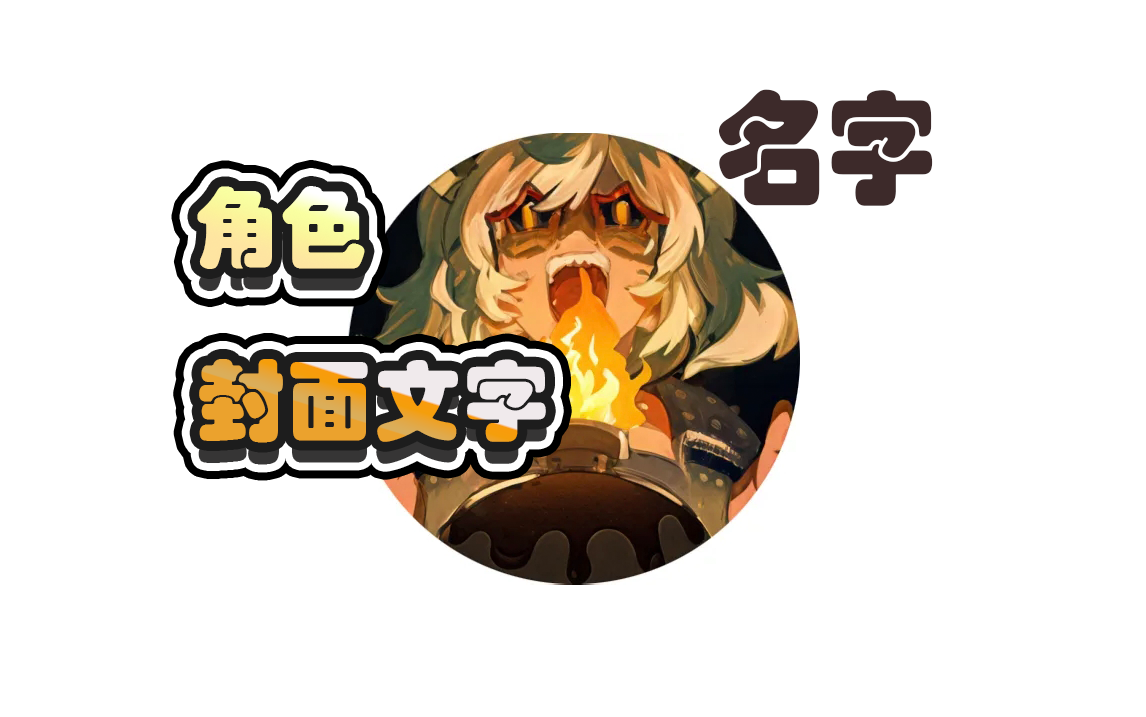
<style>
.page{position:relative;width:1146px;height:717px;background:#ffffff}
.page>*{position:absolute;margin:0}
.t1{font:124.1px "STHupo";color:#3d2a2a;scale:0.91 1}
.t2{font:88.3px "STHupo";color:#fcf49f}
.t3{font:88.3px "STHupo"}
</style>
<div class="page">
<p class="t1" style="left:719px;top:89px;width:214px;height:117px">名字</p>
<p class="t2" style="left:197px;top:186px;width:168px;height:83px">角色</p>
<p class="t3" style="left:199px;top:359px;width:347px;height:84px">封面文字</p>
</div>
